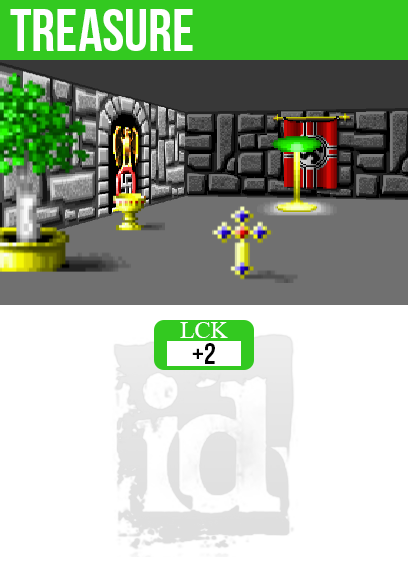
<style>
.page{position:relative;width:408px;height:585px;background:#ffffff}
.page>*{position:absolute;margin:0}
.t1{font:60px "BebasNeue";color:#ffffff}
.t2{font:24px "TimesNewRomanPSMT";color:#ffffff}
.t3{font:30px "BebasNeue";color:#000000}
</style>
<div class="page">
<p class="t1" style="left:10px;top:9px;width:183px;height:42px">treasure</p>
<p class="t2" style="left:180px;top:322px;width:48px;height:16px">LCK</p>
<p class="t3" style="left:192px;top:343px;width:23px;height:21px">+2</p>
</div>
